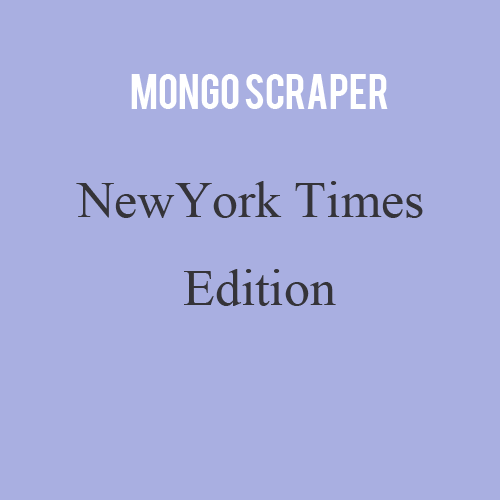
<style>
.page{position:relative;width:500px;height:500px;background:#a9afe1}
.page>*{position:absolute;margin:0}
.t1{font:51.9px "TimesNewRomanPSMT";color:#353539}
</style>
<div class="page">
<p class="t1" style="left:76px;top:181px;width:347px;height:37px">NewYork Times</p>
<p class="t1" style="left:184px;top:269px;width:152px;height:37px">Edition</p>
</div>
